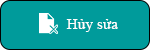
<style>
.page{position:relative;width:150px;height:50px;background:#009b9b}
.page>*{position:absolute;margin:0}
.t1{font:15.3px "TimesNewRomanPSMT";color:#fefefe}
</style>
<div class="page">
<p class="t1" style="left:66px;top:19px;width:52px;height:13px">Hủy sửa</p>
</div>
